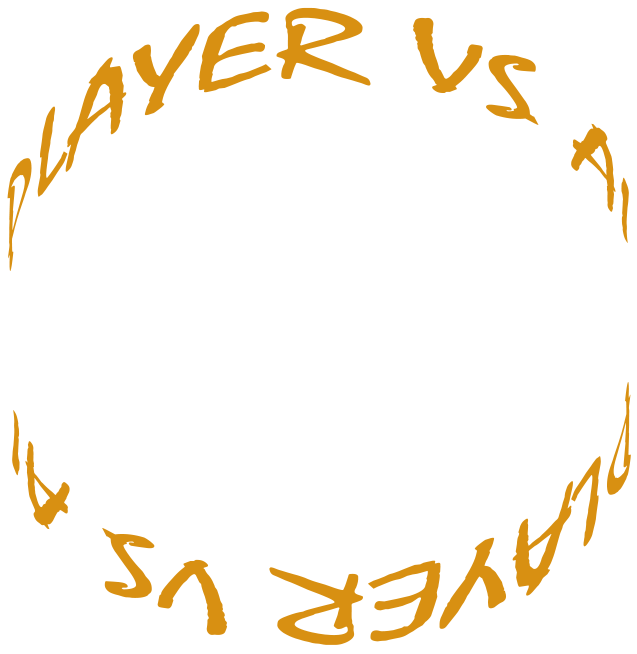
<style>
.page{position:relative;width:637px;height:654px;background:#ffffff}
.page>*{position:absolute;margin:0}
.t1{font:100.9px "Mistral";color:#d89012;scale:1.41 1}
.t2{font:100.8px "Mistral";color:#d89012;scale:1.41 1}
</style>
<div class="page">
<p class="t1" style="left:7px;top:7px;width:622px;height:264px;rotate:-1deg">PLAYER VS AI</p>
<p class="t2" style="left:12px;top:382px;width:619px;height:263px;rotate:179deg">PLAYER VS AI</p>
</div>
